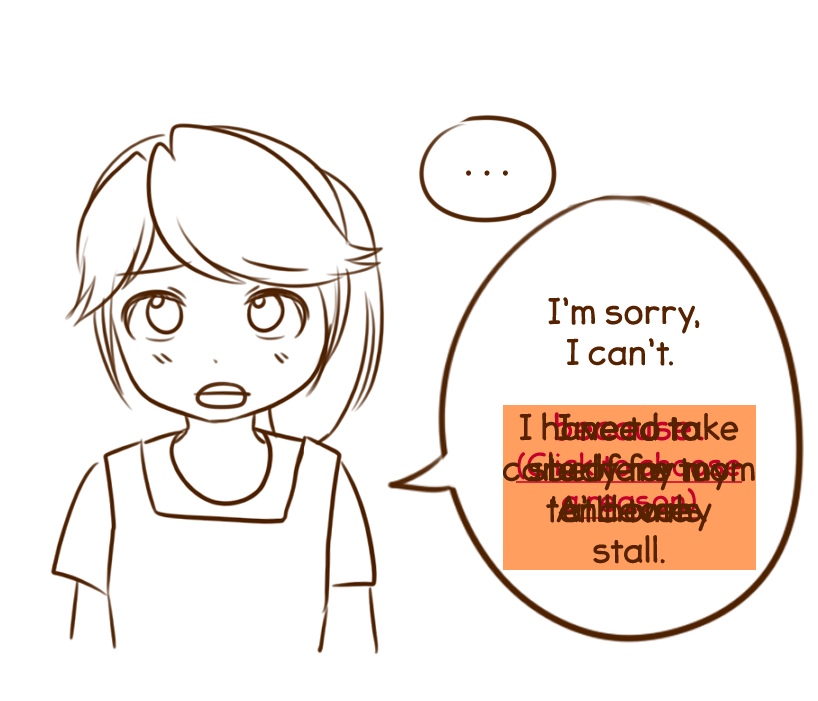
<style>
.page{position:relative;width:818px;height:701px;background:#ffffff}
.page>*{position:absolute;margin:0}
.t1{font:42.4px "JollyGoodSans-Basic";color:#572200}
.t2{font:34.1px "JollyGoodSans-Basic";color:#572200}
.t3{font:29.9px "JollyGoodSans-Basic";text-decoration:underline}
.t4{font:34.1px "JollyGoodSans-Basic"}
</style>
<div class="page">
<p class="t1" style="left:466px;top:170px;width:42px;height:6px">. . .</p>
<p class="t2" style="left:548px;top:297px;width:152px;height:69px;text-align:center">I’m sorry,<br>I can’t.</p>
<p class="t2" style="left:503px;top:412px;width:252px;height:111px;text-align:center">I have to take<br>care of my mom<br>at home.</p>
<p class="t3" style="left:516px;top:412px;width:226px;height:107px;text-align:center"><span class="t4">because..<br></span>(Click to choose<br>a reason)</p>
<p class="t2" style="left:529px;top:412px;width:201px;height:111px;text-align:center">I need to<br>study for my<br>‘A’ Levels.</p>
<p class="t2" style="left:546px;top:412px;width:166px;height:152px;text-align:center">I need to<br>be here to<br>tend to my<br>stall.</p>
</div>
